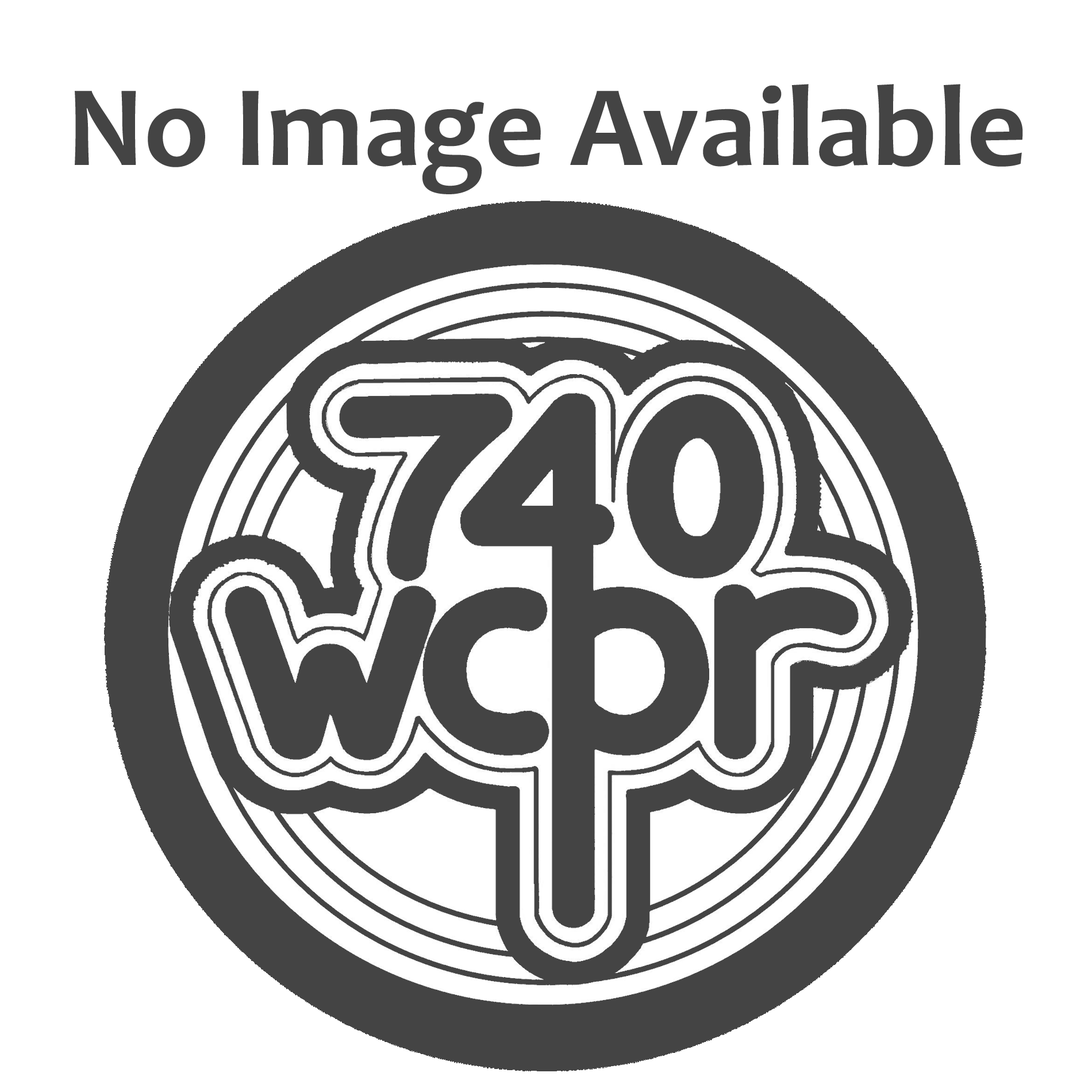
<style>
.page{position:relative;width:1092px;height:1092px;background:#ffffff}
.page>*{position:absolute;margin:0}
.t1{font:116.1px "Candara-Bold";color:#444444}
</style>
<div class="page">
<p class="t1" style="left:75px;top:84px;width:948px;height:110px">No Image Available</p>
</div>
